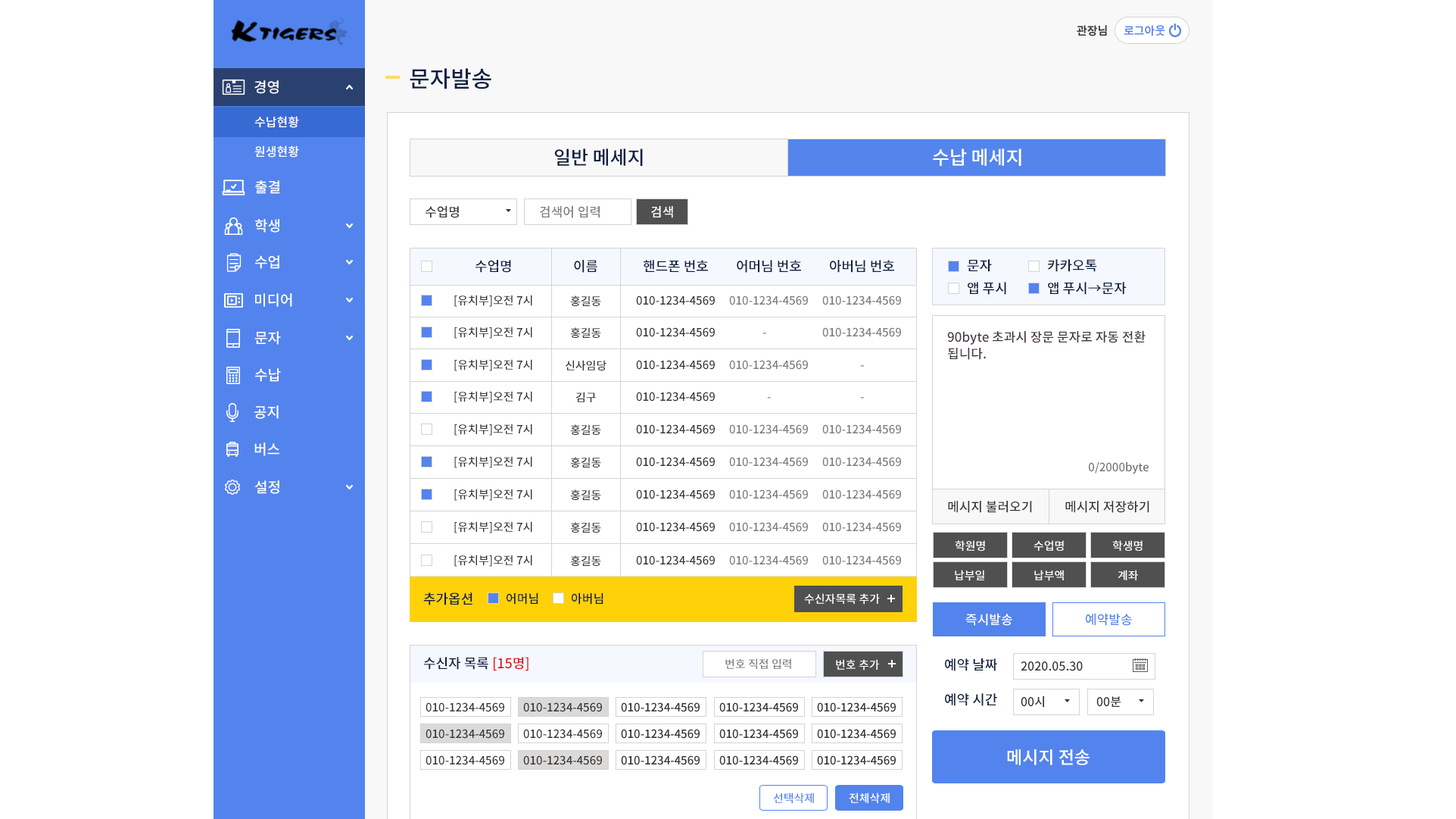
<style>
.page{position:relative;width:1456px;height:819px;background:#ffffff}
.page>*{position:absolute;margin:0}
.t1{font:22.7px "NotoSansCJKkr-Medium";color:#102042;text-transform:uppercase}
.t2{font:18.9px "NotoSansCJKkr-Medium";color:#102042;text-transform:uppercase}
.t3{font:18.9px "NotoSansCJKkr-Medium";color:#ffffff;text-transform:uppercase}
.t4{font:12.9px "NotoSansCJKkr-Medium";color:#343434;text-transform:uppercase}
.t5{font:12.9px "NotoSansCJKkr-Medium";color:#7d7a7a;text-transform:uppercase}
.t6{font:12.9px "NotoSansCJKkr-Medium";color:#ffffff;text-transform:uppercase}
.t7{font:13.6px "NotoSansCJKkr-Medium";color:#102042;text-transform:uppercase}
.t8{font:11.4px "NotoSansCJKkr-Medium";color:#343434;text-transform:uppercase}
.t9{font:11.4px "NotoSansCJKkr-Medium";color:#7d7a7a;text-transform:uppercase}
.t10{font:11.4px "NotoSansCJKkr-Medium";text-transform:uppercase}
.t11{font:12.9px/16.7px "NotoSansCJKkr-Medium";color:#443344}
.t12{font:11.4px "NotoSansCJKkr-Medium";color:#747070}
.t13{font:12.9px "NotoSansCJKkr-Medium";color:#343434}
.t14{font:11.4px "NotoSansCJKkr-Medium";color:#ffffff;text-transform:uppercase}
.t15{font:12.1px "NotoSansCJKkr-Medium";color:#102042;text-transform:uppercase}
.t16{font:12.9px "NotoSansCJKkr-Medium";color:#5384ed;text-transform:uppercase}
.t17{font:13.6px "NotoSansCJKkr-Medium";color:#e40e13;text-transform:uppercase}
.t18{font:13.6px/34.8px "NotoSansCJKkr-Medium";color:#102042;text-transform:uppercase}
.t19{font:12.1px "NotoSansCJKkr-Medium";color:#343434}
.t20{font:17.4px "NotoSansCJKkr-Medium";color:#ffffff;text-transform:uppercase}
.t21{font:11.4px "NotoSansCJKkr-Medium";color:#5384ed;text-transform:uppercase}
</style>
<div class="page">
<p class="t1" style="left:410px;top:68px;width:82px;height:21px">문자발송</p>
<p class="t2" style="left:554px;top:148px;width:89px;height:18px">일반 메세지</p>
<p class="t3" style="left:933px;top:148px;width:89px;height:18px">수납 메세지</p>
<p class="t4" style="left:426px;top:205px;width:33px;height:13px">수업명</p>
<p class="t5" style="left:540px;top:205px;width:60px;height:13px">검색어 입력</p>
<p class="t6" style="left:651px;top:206px;width:22px;height:12px">검색</p>
<p class="t7" style="left:476px;top:260px;width:35px;height:13px">수업명</p>
<p class="t7" style="left:574px;top:260px;width:24px;height:13px">이름</p>
<p class="t7" style="left:644px;top:260px;width:64px;height:12px">핸드폰 번호</p>
<p class="t7" style="left:737px;top:260px;width:64px;height:13px">어머님 번호</p>
<p class="t7" style="left:830px;top:260px;width:64px;height:13px">아버님 번호</p>
<p class="t7" style="left:967px;top:259px;width:25px;height:13px">문자</p>
<p class="t7" style="left:1048px;top:259px;width:49px;height:13px">카카오톡</p>
<p class="t7" style="left:968px;top:282px;width:39px;height:13px">앱 푸시</p>
<p class="t7" style="left:1048px;top:282px;width:79px;height:13px">앱 푸시→문자</p>
<p class="t8" style="left:454px;top:295px;width:78px;height:12px">[유치부]오전 7시</p>
<p class="t8" style="left:570px;top:295px;width:31px;height:11px">홍길동</p>
<p class="t8" style="left:636px;top:295px;width:79px;height:10px">010-1234-4569</p>
<p class="t9" style="left:729px;top:295px;width:79px;height:10px">010-1234-4569</p>
<p class="t9" style="left:823px;top:295px;width:78px;height:10px">010-1234-4569</p>
<p class="t8" style="left:454px;top:326px;width:78px;height:13px">[유치부]오전 7시</p>
<p class="t8" style="left:570px;top:327px;width:31px;height:11px">홍길동</p>
<p class="t8" style="left:636px;top:327px;width:79px;height:10px">010-1234-4569</p>
<p class="t9" style="left:823px;top:327px;width:78px;height:10px">010-1234-4569</p>
<p class="t10" style="left:763px;top:332px;width:3px;height:2px">-</p>
<p class="t11" style="left:947px;top:330px;width:199px;height:30px">90byte 초과시 장문 문자로 자동 전환<br>됩니다.</p>
<p class="t8" style="left:454px;top:359px;width:78px;height:12px">[유치부]오전 7시</p>
<p class="t8" style="left:566px;top:360px;width:41px;height:10px">신사임당</p>
<p class="t8" style="left:636px;top:360px;width:79px;height:10px">010-1234-4569</p>
<p class="t9" style="left:729px;top:360px;width:79px;height:10px">010-1234-4569</p>
<p class="t10" style="left:860px;top:365px;width:4px;height:2px">-</p>
<p class="t8" style="left:454px;top:391px;width:78px;height:12px">[유치부]오전 7시</p>
<p class="t8" style="left:576px;top:392px;width:20px;height:10px">김구</p>
<p class="t8" style="left:636px;top:392px;width:79px;height:9px">010-1234-4569</p>
<p class="t10" style="left:767px;top:397px;width:4px;height:1px">-</p>
<p class="t10" style="left:860px;top:397px;width:4px;height:1px">-</p>
<p class="t8" style="left:454px;top:423px;width:78px;height:12px">[유치부]오전 7시</p>
<p class="t8" style="left:570px;top:424px;width:31px;height:11px">홍길동</p>
<p class="t8" style="left:636px;top:424px;width:79px;height:10px">010-1234-4569</p>
<p class="t9" style="left:729px;top:424px;width:79px;height:10px">010-1234-4569</p>
<p class="t9" style="left:823px;top:424px;width:78px;height:10px">010-1234-4569</p>
<p class="t8" style="left:454px;top:456px;width:78px;height:12px">[유치부]오전 7시</p>
<p class="t8" style="left:570px;top:457px;width:31px;height:10px">홍길동</p>
<p class="t8" style="left:636px;top:457px;width:79px;height:10px">010-1234-4569</p>
<p class="t9" style="left:729px;top:457px;width:79px;height:10px">010-1234-4569</p>
<p class="t9" style="left:823px;top:457px;width:78px;height:10px">010-1234-4569</p>
<p class="t12" style="left:1089px;top:462px;width:60px;height:12px">0/2000byte</p>
<p class="t8" style="left:454px;top:489px;width:78px;height:12px">[유치부]오전 7시</p>
<p class="t8" style="left:570px;top:489px;width:31px;height:11px">홍길동</p>
<p class="t8" style="left:636px;top:489px;width:79px;height:10px">010-1234-4569</p>
<p class="t9" style="left:729px;top:489px;width:79px;height:10px">010-1234-4569</p>
<p class="t9" style="left:823px;top:489px;width:78px;height:10px">010-1234-4569</p>
<p class="t13" style="left:948px;top:501px;width:84px;height:12px">메시지 불러오기</p>
<p class="t13" style="left:1066px;top:501px;width:84px;height:12px">메시지 저장하기</p>
<p class="t8" style="left:454px;top:521px;width:78px;height:12px">[유치부]오전 7시</p>
<p class="t8" style="left:570px;top:522px;width:31px;height:10px">홍길동</p>
<p class="t8" style="left:636px;top:522px;width:79px;height:10px">010-1234-4569</p>
<p class="t9" style="left:729px;top:522px;width:79px;height:10px">010-1234-4569</p>
<p class="t9" style="left:823px;top:522px;width:78px;height:10px">010-1234-4569</p>
<p class="t14" style="left:955px;top:540px;width:30px;height:11px">학원명</p>
<p class="t14" style="left:1034px;top:540px;width:30px;height:11px">수업명</p>
<p class="t14" style="left:1113px;top:540px;width:30px;height:11px">학생명</p>
<p class="t8" style="left:454px;top:554px;width:78px;height:13px">[유치부]오전 7시</p>
<p class="t8" style="left:570px;top:555px;width:31px;height:11px">홍길동</p>
<p class="t8" style="left:636px;top:555px;width:79px;height:10px">010-1234-4569</p>
<p class="t9" style="left:729px;top:555px;width:79px;height:10px">010-1234-4569</p>
<p class="t9" style="left:823px;top:555px;width:78px;height:10px">010-1234-4569</p>
<p class="t14" style="left:955px;top:570px;width:30px;height:11px">납부일</p>
<p class="t14" style="left:1035px;top:570px;width:29px;height:11px">납부액</p>
<p class="t14" style="left:1118px;top:570px;width:20px;height:10px">계좌</p>
<p class="t7" style="left:423px;top:592px;width:50px;height:13px">추가옵션</p>
<p class="t15" style="left:507px;top:592px;width:31px;height:12px">어머님</p>
<p class="t15" style="left:572px;top:592px;width:32px;height:12px">아버님</p>
<p class="t14" style="left:804px;top:593px;width:76px;height:11px">수신자목록 추가</p>
<p class="t6" style="left:966px;top:613px;width:47px;height:13px">즉시발송</p>
<p class="t16" style="left:1086px;top:613px;width:46px;height:13px">예약발송</p>
<p class="t7" style="left:424px;top:657px;width:105px;height:14px">수신자 목록 <span class="t17">[15명]</span></p>
<p class="t9" style="left:726px;top:658px;width:65px;height:11px">번호 직접 입력</p>
<p class="t14" style="left:836px;top:659px;width:43px;height:11px">번호 추가</p>
<p class="t18" style="left:945px;top:658px;width:52px;height:48px">예약 날짜<br>예약 시간</p>
<p class="t19" style="left:1021px;top:661px;width:62px;height:10px">2020.05.30</p>
<p class="t19" style="left:1021px;top:695px;width:23px;height:12px">00시</p>
<p class="t19" style="left:1097px;top:696px;width:25px;height:11px">00분</p>
<p class="t8" style="left:426px;top:702px;width:78px;height:10px">010-1234-4569</p>
<p class="t8" style="left:523px;top:702px;width:79px;height:10px">010-1234-4569</p>
<p class="t8" style="left:426px;top:729px;width:78px;height:9px">010-1234-4569</p>
<p class="t8" style="left:523px;top:729px;width:79px;height:9px">010-1234-4569</p>
<p class="t20" style="left:1007px;top:749px;width:83px;height:16px">메시지 전송</p>
<p class="t8" style="left:426px;top:755px;width:78px;height:10px">010-1234-4569</p>
<p class="t8" style="left:523px;top:755px;width:79px;height:10px">010-1234-4569</p>
<p class="t21" style="left:773px;top:792px;width:41px;height:12px">선택삭제</p>
<p class="t14" style="left:849px;top:792px;width:41px;height:11px">전체삭제</p>
</div>
